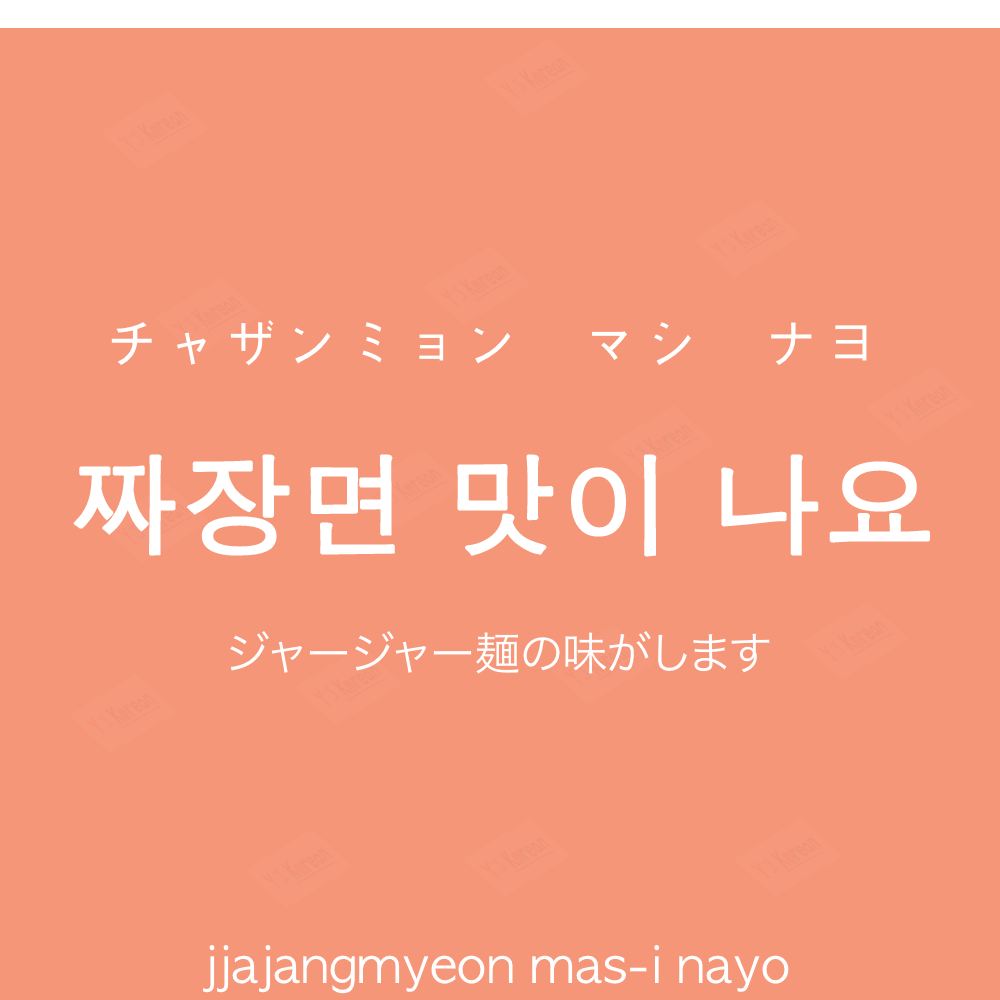
<style>
.page{position:relative;width:1000px;height:1000px;background:#f69679}
.page>*{position:absolute;margin:0}
.t1{font:60px "AppleGothic";color:#ffffff}
.t2{font:110px "AppleGothic";color:#ffffff;font-weight:bold}
.t3{font:45px "HiraKakuProN-W3";color:#ffffff}
.t4{font:50px "AppleGothic";color:#ffffff}
</style>
<div class="page">
<p class="t1" style="left:111px;top:320px;width:756px;height:46px">チャザンミョン　マシ　ナヨ</p>
<p class="t2" style="left:73px;top:454px;width:857px;height:103px">짜장면 맛이 나요</p>
<p class="t3" style="left:230px;top:631px;width:540px;height:43px">ジャージャー麺の味がします</p>
<p class="t4" style="left:203px;top:945px;width:586px;height:49px">jjajangmyeon mas-i nayo</p>
</div>
